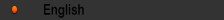
<style>
.page{position:relative;width:224px;height:20px;background:#333333}
.page>*{position:absolute;margin:0}
.t1{font:14.9px "ArialRoundedMTBold";color:#030303;scale:0.78 1}
</style>
<div class="page">
<p class="t1" style="left:44px;top:4px;width:40px;height:14px">English</p>
</div>
